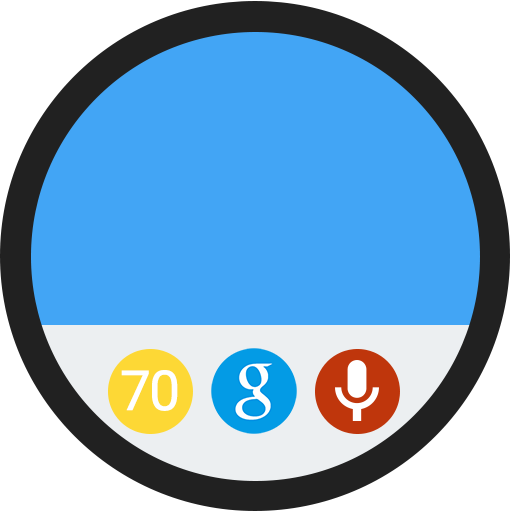
<style>
.page{position:relative;width:512px;height:512px;background:#42a5f5}
.page>*{position:absolute;margin:0}
.t1{font:55.4px "Roboto-Regular";letter-spacing:-0.06em;color:#ffffff;font-weight:bold}
</style>
<div class="page">
<p class="t1" style="left:121px;top:370px;width:57px;height:41px">70</p>
</div>
